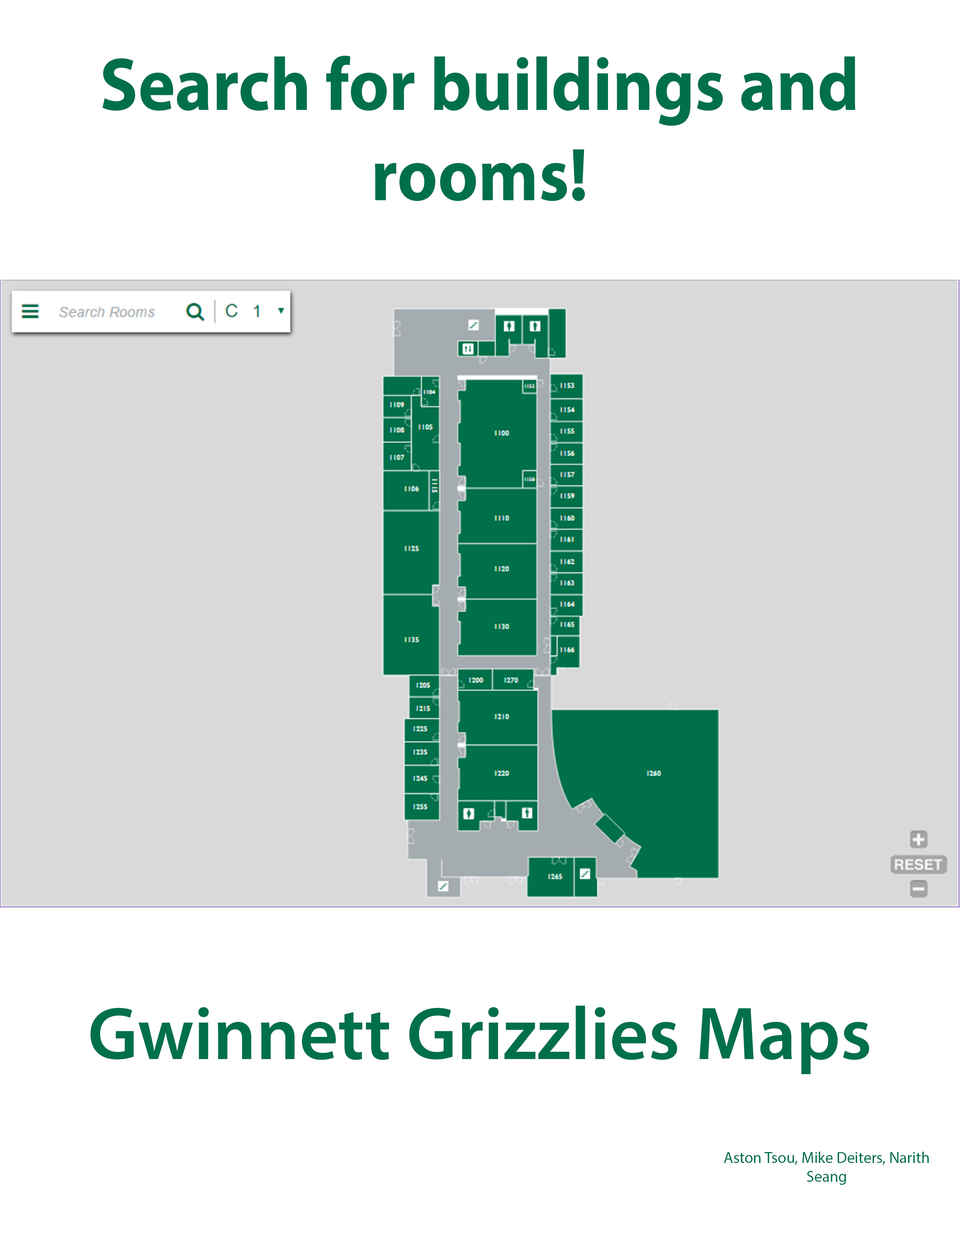
<style>
.page{position:relative;width:960px;height:1242px;background:#ffffff}
.page>*{position:absolute;margin:0}
.t1{font:75.2px "MyriadPro-Bold";color:#00704a;scale:0.93 1}
.t2{font:75.3px "MyriadPro-Semibold";color:#00704a}
.t3{font:15.7px "MyriadPro-Regular";color:#00704a}
</style>
<div class="page">
<p class="t1" style="left:102px;top:56px;width:753px;height:145px;text-align:center">Search for buildings and rooms!</p>
<p class="t2" style="left:90px;top:1006px;width:779px;height:68px">Gwinnett Grizzlies Maps</p>
<p class="t3" style="left:724px;top:1152px;width:205px;height:33px;text-align:center">Aston Tsou, Mike Deiters, Narith Seang</p>
</div>
